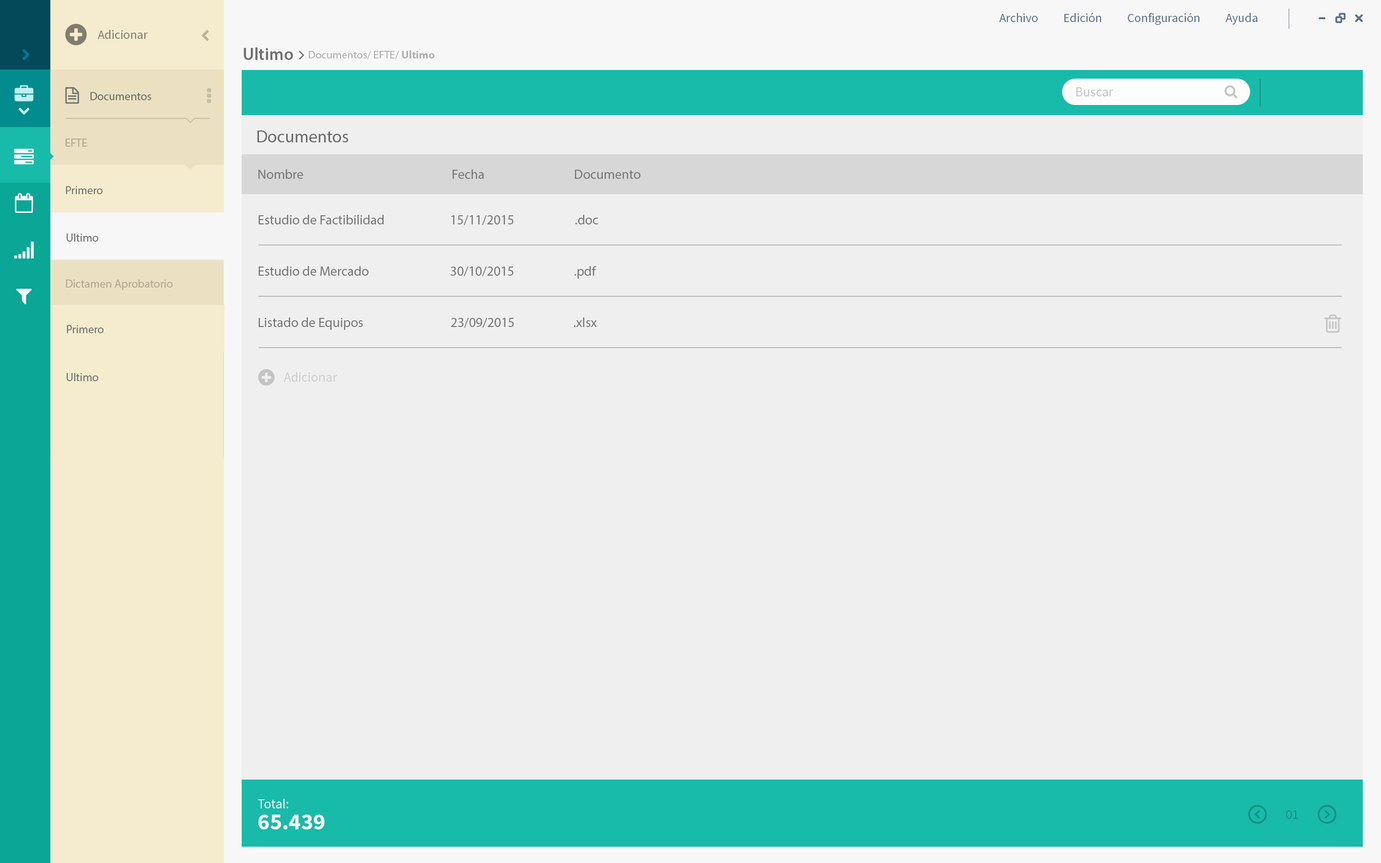
<style>
.page{position:relative;width:1381px;height:863px;background:#efefef}
.page>*{position:absolute;margin:0}
.t1{font:17.3px "MyriadPro-Semibold";color:#707070}
.t2{font:11px "MyriadPro-Regular";color:#afafaf}
.t3{font:11px "MyriadPro-Bold";color:#afafaf}
.t4{font:11.5px "MyriadPro-Regular";color:#6a6b66}
.t5{font:17.3px "MyriadPro-Regular";color:#6a6b66}
.t6{font:11.5px "MyriadPro-Regular";color:#b2a791}
.t7{font:13.4px "MyriadPro-Regular";color:#757575}
.t8{font:11.5px "MyriadPro-Regular";color:#707070}
.t9{font:13.4px "MyriadPro-Regular";color:#747474}
</style>
<div class="page">
<p class="t1" style="left:244px;top:47px;width:49px;height:13px">Ultimo</p>
<p class="t2" style="left:309px;top:50px;width:126px;height:9px">Documentos/ EFTE/ <span class="t3">Ultimo</span></p>
<p class="t4" style="left:90px;top:92px;width:62px;height:8px">Documentos</p>
<p class="t5" style="left:257px;top:130px;width:91px;height:12px">Documentos</p>
<p class="t6" style="left:65px;top:139px;width:22px;height:8px">EFTE</p>
<p class="t7" style="left:259px;top:169px;width:44px;height:10px">Nombre</p>
<p class="t7" style="left:453px;top:169px;width:31px;height:10px">Fecha</p>
<p class="t7" style="left:575px;top:170px;width:66px;height:9px">Documento</p>
<p class="t8" style="left:66px;top:186px;width:37px;height:8px">Primero</p>
<p class="t9" style="left:259px;top:215px;width:125px;height:9px">Estudio de Factibilidad</p>
<p class="t9" style="left:451px;top:215px;width:63px;height:10px">15/11/2015</p>
<p class="t9" style="left:576px;top:215px;width:23px;height:9px">.doc</p>
<p class="t8" style="left:67px;top:234px;width:31px;height:8px">Ultimo</p>
<p class="t9" style="left:259px;top:266px;width:110px;height:10px">Estudio de Mercado</p>
<p class="t9" style="left:450px;top:267px;width:64px;height:10px">30/10/2015</p>
<p class="t9" style="left:575px;top:266px;width:22px;height:13px">.pdf</p>
<p class="t6" style="left:66px;top:280px;width:107px;height:10px">Dictamen Aprobatorio</p>
<p class="t9" style="left:259px;top:317px;width:104px;height:13px">Listado de Equipos</p>
<p class="t9" style="left:451px;top:318px;width:63px;height:10px">23/09/2015</p>
<p class="t9" style="left:574px;top:317px;width:23px;height:10px">.xlsx</p>
<p class="t8" style="left:67px;top:325px;width:37px;height:8px">Primero</p>
<p class="t8" style="left:67px;top:373px;width:31px;height:8px">Ultimo</p>
</div>
